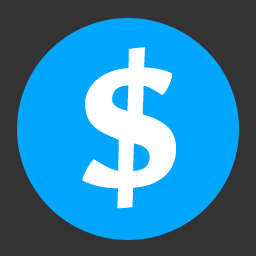
<style>
.page{position:relative;width:256px;height:256px;background:#00a6fc}
.page>*{position:absolute;margin:0}
.t1{font:202px "ChaparralPro-Bold";letter-spacing:-0.017em;color:#ffffff;text-transform:uppercase}
</style>
<div class="page">
<p class="t1" style="left:82px;top:47px;width:94px;height:162px">$</p>
</div>
